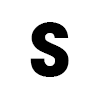
<style>
.page{position:relative;width:100px;height:100px;background:#ffffff}
.page>*{position:absolute;margin:0}
.t1{font:72px "AvantGardeLT-Bold";color:#000000}
</style>
<div class="page">
<p class="t1" style="left:30px;top:22px;width:39px;height:55px">S</p>
</div>
